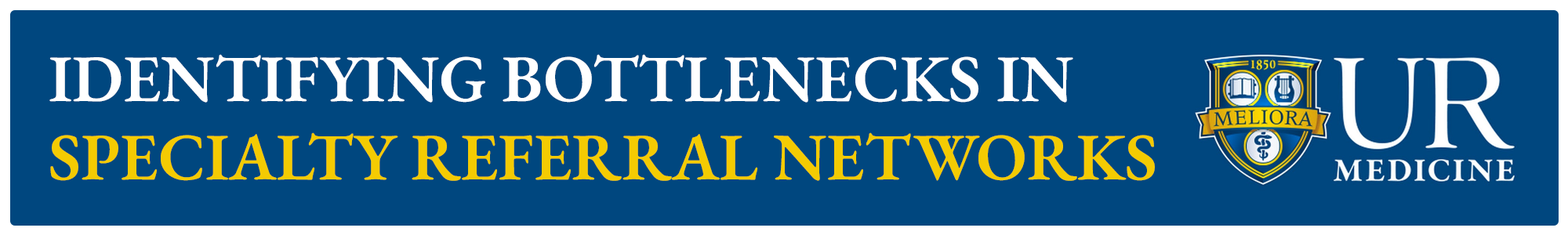
<style>
.page{position:relative;width:1568px;height:235px;background:#00477f}
.page>*{position:absolute;margin:0}
.t1{font:66.6px/78.4px "EBGaramond-SemiBold";color:#f4cb02}
.t2{font:66.6px/78.4px "EBGaramond-SemiBold";color:#ffffff}
</style>
<div class="page">
<p class="t1" style="left:49px;top:54px;width:1106px;height:127px"><span class="t2">IDENTIFYING BOTTLENECKS IN<br></span>SPECIALTY REFERRAL NETWORKS</p>
</div>
